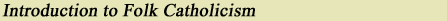
<style>
.page{position:relative;width:447px;height:21px;background:#e6e6b8}
.page>*{position:absolute;margin:0}
.t1{font:18px "TimesNewRomanPSMT";color:#010101;font-weight:bold;font-style:italic}
</style>
<div class="page">
<p class="t1" style="left:2px;top:3px;width:254px;height:14px">Introduction to Folk Catholicism</p>
</div>
